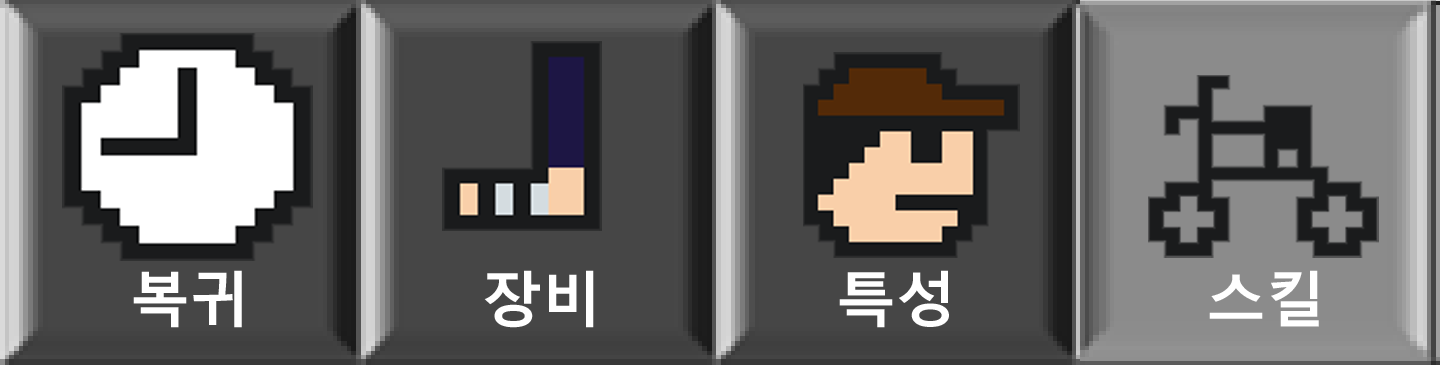
<style>
.page{position:relative;width:1440px;height:365px;background:#464646}
.page>*{position:absolute;margin:0}
.t1{font:60px "MalgunGothicBold";color:#ffffff}
</style>
<div class="page">
<p class="t1" style="left:133px;top:270px;width:109px;height:58px">복귀</p>
<p class="t1" style="left:484px;top:270px;width:110px;height:58px">장비</p>
<p class="t1" style="left:839px;top:270px;width:110px;height:58px">특성</p>
<p class="t1" style="left:1209px;top:270px;width:110px;height:57px">스킬</p>
</div>
